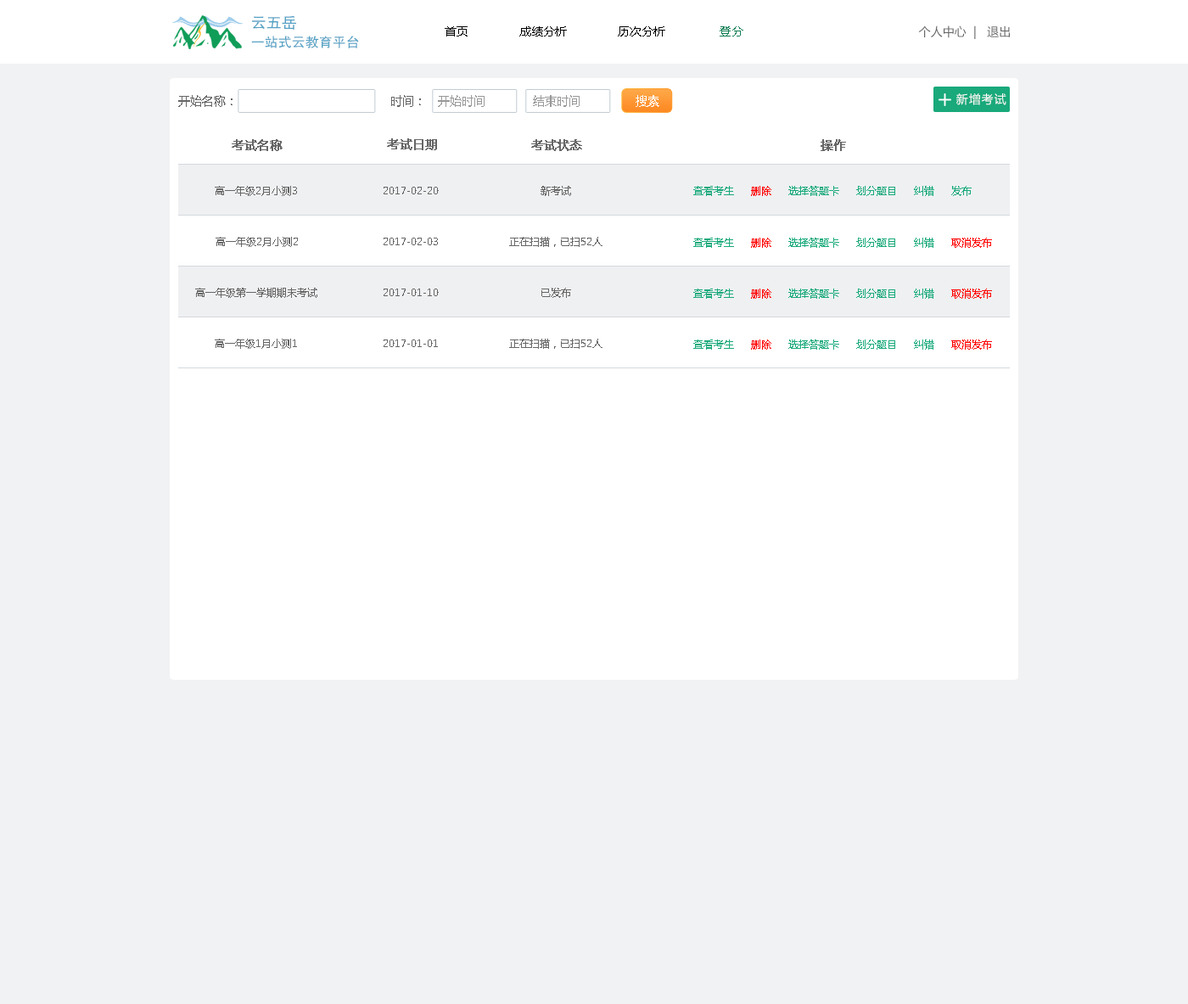
<style>
.page{position:relative;width:1188px;height:1004px;background:#f1f2f3}
.page>*{position:absolute;margin:0}
.t1{font:13.6px/20.4px "FZHTK--GBK1-0";color:#53a0c4}
.t2{font:15.3px/20.4px "FZHTK--GBK1-0";color:#53a0c4}
.t3{font:11.9px "MicrosoftYaHei";color:#000000;text-transform:uppercase}
.t4{font:11.9px "MicrosoftYaHei";color:#107d54;text-transform:uppercase}
.t5{font:11.9px "MicrosoftYaHei";color:#666666;text-transform:uppercase}
.t6{font:11.9px "MicrosoftYaHei";color:#666666}
.t7{font:11.9px "MicrosoftYaHei";color:#999999}
.t8{font:11.9px "MicrosoftYaHei";color:#ffffff}
.t9{font:11.9px "MicrosoftYaHei";letter-spacing:0.07em;color:#ffffff}
.t10{font:11.9px "MicrosoftYaHei";color:#666666;font-weight:bold}
.t11{font:10.2px "MicrosoftYaHei";color:#666666}
.t12{font:10.2px "MicrosoftYaHei";color:#19a97b}
.t13{font:10.2px "MicrosoftYaHei";color:#ff0000}
</style>
<div class="page">
<p class="t1" style="left:251px;top:15px;width:108px;height:33px"><span class="t2">云五岳<br></span>一站式云教育平台</p>
<p class="t3" style="left:445px;top:26px;width:298px;height:10px">首页               成绩分析               历次分析                <span class="t4">登分</span></p>
<p class="t5" style="left:918px;top:25px;width:92px;height:14px">个人中心  |   退出</p>
<p class="t6" style="left:178px;top:95px;width:54px;height:12px">开始名称：</p>
<p class="t6" style="left:391px;top:95px;width:30px;height:12px">时间：</p>
<p class="t7" style="left:438px;top:95px;width:47px;height:12px">开始时间</p>
<p class="t7" style="left:533px;top:95px;width:47px;height:12px">结束时间</p>
<p class="t8" style="left:636px;top:95px;width:23px;height:12px">搜索</p>
<p class="t9" style="left:956px;top:93px;width:50px;height:12px">新增考试</p>
<p class="t10" style="left:232px;top:139px;width:51px;height:12px">考试名称</p>
<p class="t10" style="left:387px;top:138px;width:50px;height:12px">考试日期</p>
<p class="t10" style="left:531px;top:139px;width:51px;height:12px">考试状态</p>
<p class="t10" style="left:821px;top:139px;width:25px;height:12px">操作</p>
<p class="t11" style="left:215px;top:186px;width:82px;height:10px">高一年级2月小测3</p>
<p class="t11" style="left:541px;top:186px;width:30px;height:10px">新考试</p>
<p class="t12" style="left:693px;top:186px;width:279px;height:10px">查看考生     <span class="t13">删除</span>     选择答题卡     划分题目     纠错     发布</p>
<p class="t11" style="left:384px;top:187px;width:55px;height:7px">2017-02-20</p>
<p class="t11" style="left:216px;top:237px;width:82px;height:10px">高一年级2月小测2</p>
<p class="t11" style="left:384px;top:238px;width:54px;height:7px">2017-02-03</p>
<p class="t11" style="left:509px;top:237px;width:93px;height:10px">正在扫描，已扫52人</p>
<p class="t12" style="left:693px;top:238px;width:299px;height:10px">查看考生     <span class="t13">删除</span>     选择答题卡     划分题目     纠错     <span class="t13">取消发布</span></p>
<p class="t11" style="left:195px;top:288px;width:122px;height:10px">高一年级第一学期期末考试</p>
<p class="t11" style="left:384px;top:288px;width:55px;height:8px">2017-01-10</p>
<p class="t11" style="left:541px;top:288px;width:30px;height:10px">已发布</p>
<p class="t12" style="left:693px;top:288px;width:299px;height:11px">查看考生     <span class="t13">删除</span>     选择答题卡     划分题目     纠错     <span class="t13">取消发布</span></p>
<p class="t11" style="left:215px;top:339px;width:82px;height:10px">高一年级1月小测1</p>
<p class="t11" style="left:384px;top:339px;width:54px;height:8px">2017-01-01</p>
<p class="t11" style="left:509px;top:339px;width:93px;height:10px">正在扫描，已扫52人</p>
<p class="t12" style="left:693px;top:339px;width:299px;height:11px">查看考生     <span class="t13">删除</span>     选择答题卡     划分题目     纠错     <span class="t13">取消发布</span></p>
</div>
